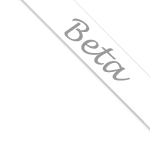
<style>
.page{position:relative;width:150px;height:150px;background:#ffffff}
.page>*{position:absolute;margin:0}
.t1{font:30px "LucidaHandwriting-Italic";color:#999999}
</style>
<div class="page">
<p class="t1" style="left:64px;top:18px;width:66px;height:63px;rotate:44deg">Beta</p>
</div>
